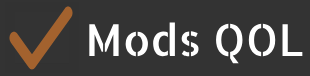
<style>
.page{position:relative;width:310px;height:76px;background:#333333}
.page>*{position:absolute;margin:0}
.t1{font:44px "AllertaStencil-Regular";color:#ffffff}
</style>
<div class="page">
<p class="t1" style="left:89px;top:22px;width:214px;height:42px">Mods QOL</p>
</div>
